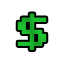
<style>
.page{position:relative;width:64px;height:64px;background:#ffffff}
.page>*{position:absolute;margin:0}
.t1{font:40px "HalfBoldPixel-7";letter-spacing:0.01em;color:#1bb62d}
</style>
<div class="page">
<p class="t1" style="left:17px;top:13px;width:30px;height:37px">$</p>
</div>
